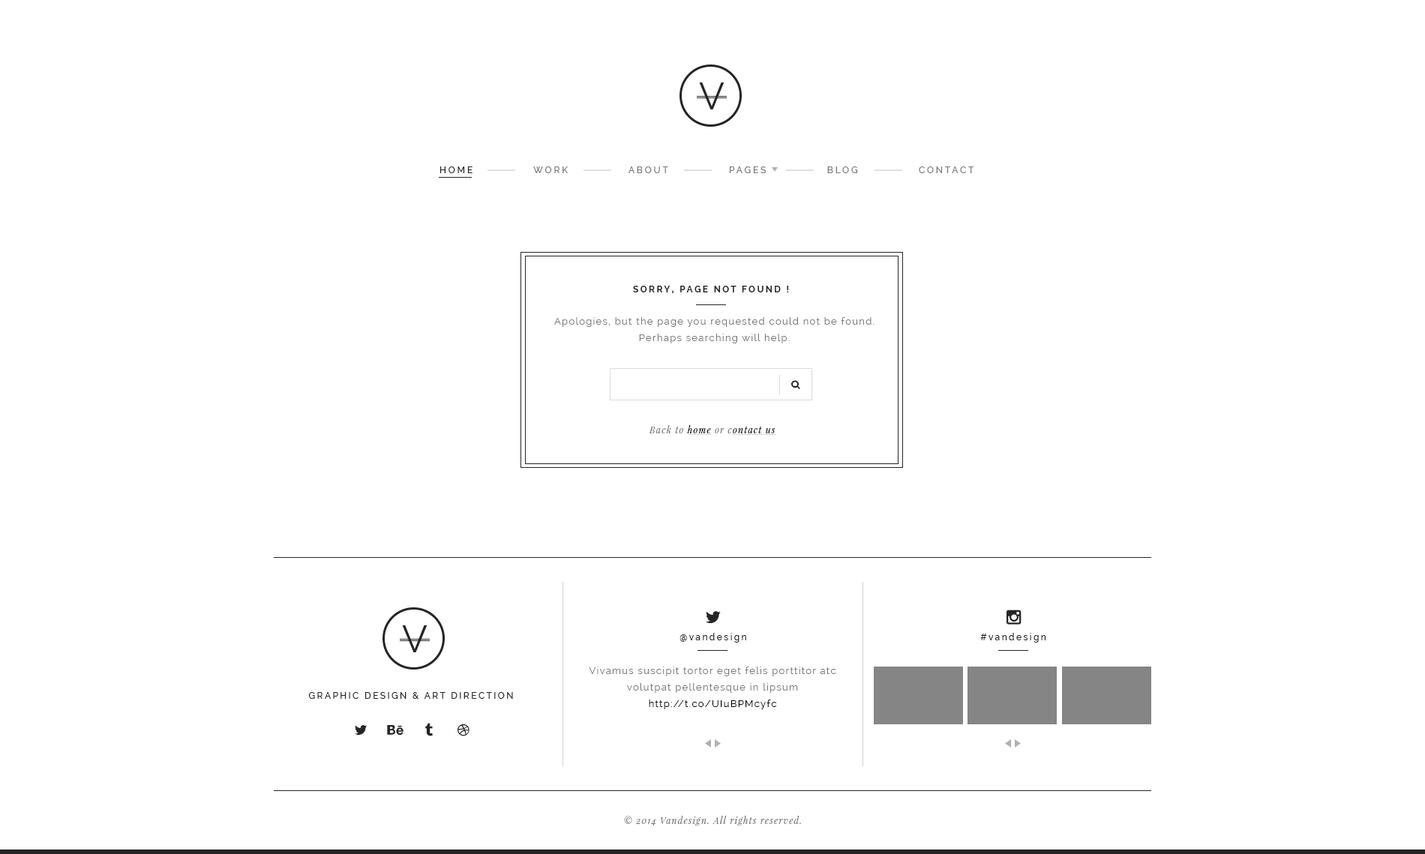
<style>
.page{position:relative;width:1425px;height:854px;background:#ffffff}
.page>*{position:absolute;margin:0}
.t1{font:9px "Raleway-Medium";letter-spacing:0.2em;color:#7a7a7a;text-transform:uppercase;scale:1.04 1}
.t2{font:9px "Raleway-Medium";letter-spacing:0.2em;color:#252525;text-transform:uppercase;scale:1.04 1}
.t3{font:9px "Raleway-Bold";letter-spacing:0.2em;color:#252525;text-transform:uppercase}
.t4{font:9.8px/16.5px "Raleway";letter-spacing:0.1em;color:#7a7a7a}
.t5{font:9px "PlayfairDisplay-Italic";letter-spacing:0.1em;color:#000000;text-decoration:underline}
.t6{font:9px "PlayfairDisplay-Italic";letter-spacing:0.1em;color:#7a7a7a}
.t7{font:9px "Raleway-Medium";letter-spacing:0.2em;color:#252525}
.t8{font:9.8px/16.5px "Raleway";letter-spacing:0.1em;color:#000000}
.t9{font:9px "Raleway-Medium";letter-spacing:0.2em;color:#252525;text-transform:uppercase}
</style>
<div class="page">
<p class="t1" style="left:440px;top:166px;width:534px;height:7px"><span class="t2">HOME              </span>Work              About              Pages              Blog              Contact</p>
<p class="t3" style="left:633px;top:286px;width:156px;height:7px">Sorry, Page not found !</p>
<p class="t4" style="left:554px;top:317px;width:320px;height:27px;text-align:center">Apologies, but the page you requested could not be found. Perhaps searching will help.</p>
<p class="t5" style="left:649px;top:425px;width:127px;height:10px"><span class="t6">Back to </span>home<span class="t6"> or c</span>ontact us</p>
<p class="t7" style="left:680px;top:633px;width:66px;height:10px">@vandesign</p>
<p class="t7" style="left:980px;top:633px;width:66px;height:10px">#vandesign</p>
<p class="t4" style="left:589px;top:667px;width:247px;height:43px;text-align:center">Vivamus suscipit tortor eget felis porttitor atc <br>volutpat pellentesque in lipsum<br><span class="t8">http://t.co/UIuBPMcyfc</span></p>
<p class="t9" style="left:308px;top:692px;width:205px;height:7px">Graphic Design &amp; Art Direction</p>
<p class="t6" style="left:624px;top:816px;width:177px;height:10px">© 2014 Vandesign. All rights reserved.</p>
</div>
